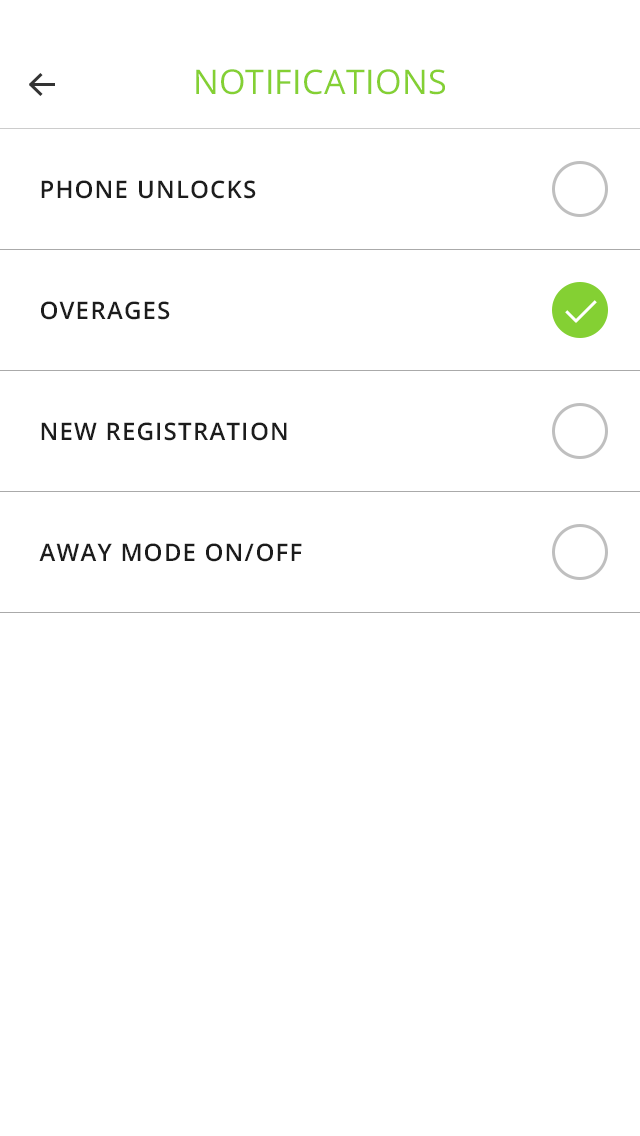
<style>
.page{position:relative;width:640px;height:1136px;background:#ffffff}
.page>*{position:absolute;margin:0}
.t1{font:34px "OpenSans";letter-spacing:0.01em;color:#84d033;text-transform:uppercase}
.t2{font:24px "OpenSans-Semibold";letter-spacing:0.05em;color:#1c1c1c;text-transform:uppercase}
</style>
<div class="page">
<p class="t1" style="left:196px;top:69px;width:249px;height:26px">NOTIFICATIONS</p>
<p class="t2" style="left:41px;top:180px;width:215px;height:19px">PHONE UNLOCKS</p>
<p class="t2" style="left:41px;top:301px;width:129px;height:19px">OVERAGES</p>
<p class="t2" style="left:41px;top:422px;width:246px;height:19px">NEW REGISTRATION</p>
<p class="t2" style="left:39px;top:543px;width:263px;height:19px">AWAY MODE ON/OFF</p>
</div>
